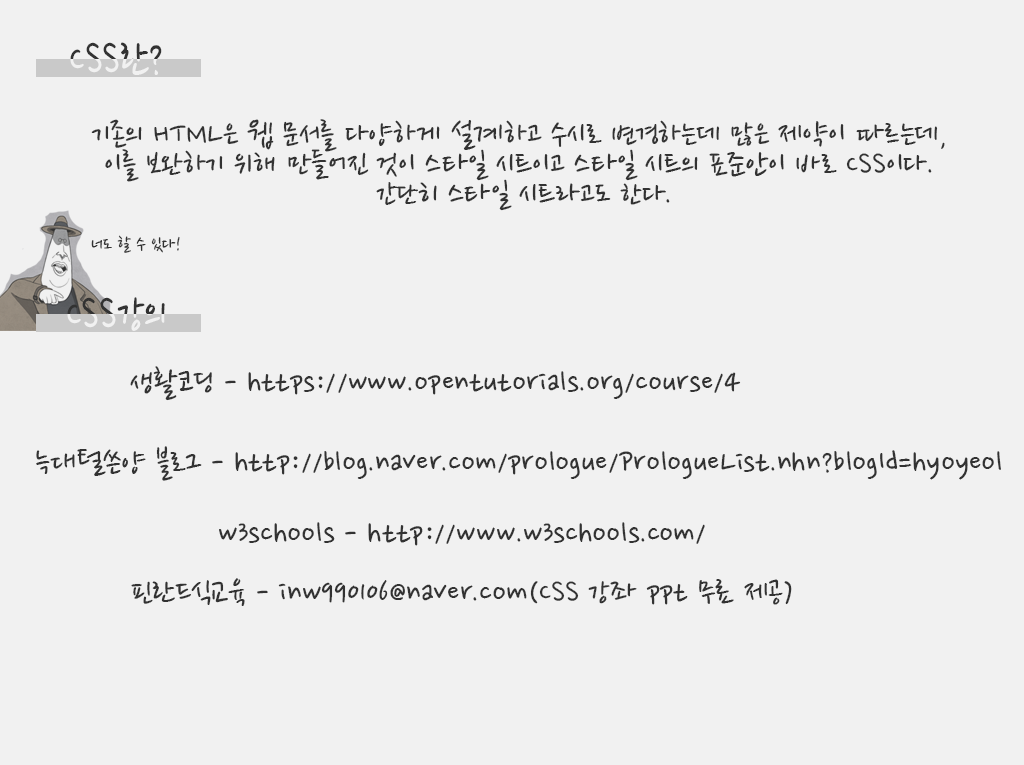
<style>
.page{position:relative;width:1024px;height:765px;background:#f1f1f1}
.page>*{position:absolute;margin:0}
.t1{font:53px "NanumPen";scale:0.84 1}
.t2{font:35px/30px "NanumPen";color:#323232}
.t3{font:20px "NanumPen";color:#323232}
.t4{font:35px "NanumPen";color:#323232}
</style>
<div class="page">
<p class="t1" style="left:70px;top:42px;width:92px;height:33px">CSS란?</p>
<p class="t1" style="left:70px;top:42px;width:92px;height:33px">CSS란?</p>
<p class="t2" style="left:91px;top:119px;width:854px;height:92px;text-align:center">기존의 HTML은 웹 문서를 다양하게 설계하고 수시로 변경하는데 많은 제약이 따르는데, <br>이를 보완하기 위해 만들어진 것이 스타일 시트이고 스타일 시트의 표준안이 바로 CSS이다. <br>간단히 스타일 시트라고도 한다.</p>
<p class="t3" style="left:91px;top:235px;width:89px;height:18px">너도 할 수 있다!</p>
<p class="t1" style="left:67px;top:297px;width:98px;height:34px">CSS강의</p>
<p class="t1" style="left:67px;top:297px;width:98px;height:34px">CSS강의</p>
<p class="t4" style="left:130px;top:366px;width:611px;height:35px">생활코딩 - https://www.opentutorials.org/course/4</p>
<p class="t4" style="left:36px;top:446px;width:965px;height:35px">늑대털쓴양 블로그 - http://blog.naver.com/prologue/PrologueList.nhn?blogId=hyoyeol</p>
<p class="t4" style="left:219px;top:522px;width:486px;height:24px">w3schools - http://www.w3schools.com/</p>
<p class="t4" style="left:131px;top:578px;width:661px;height:28px">핀란드식교육 - inw990106@naver.com(CSS 강좌 ppt 무료 제공)</p>
</div>
